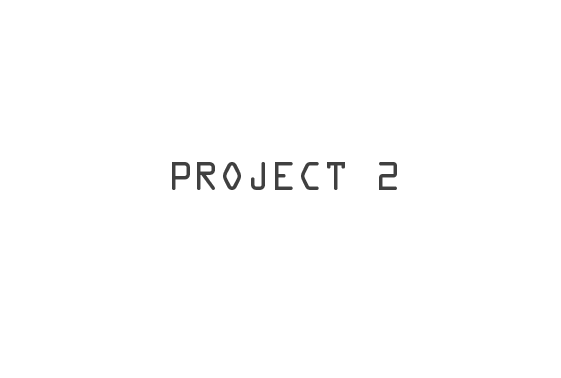
<style>
.page{position:relative;width:561px;height:378px;background:#ffffff}
.page>*{position:absolute;margin:0}
.t1{font:36px "OCRAStd";color:#404040;text-transform:uppercase}
</style>
<div class="page">
<p class="t1" style="left:172px;top:162px;width:225px;height:28px">Project 2</p>
</div>
